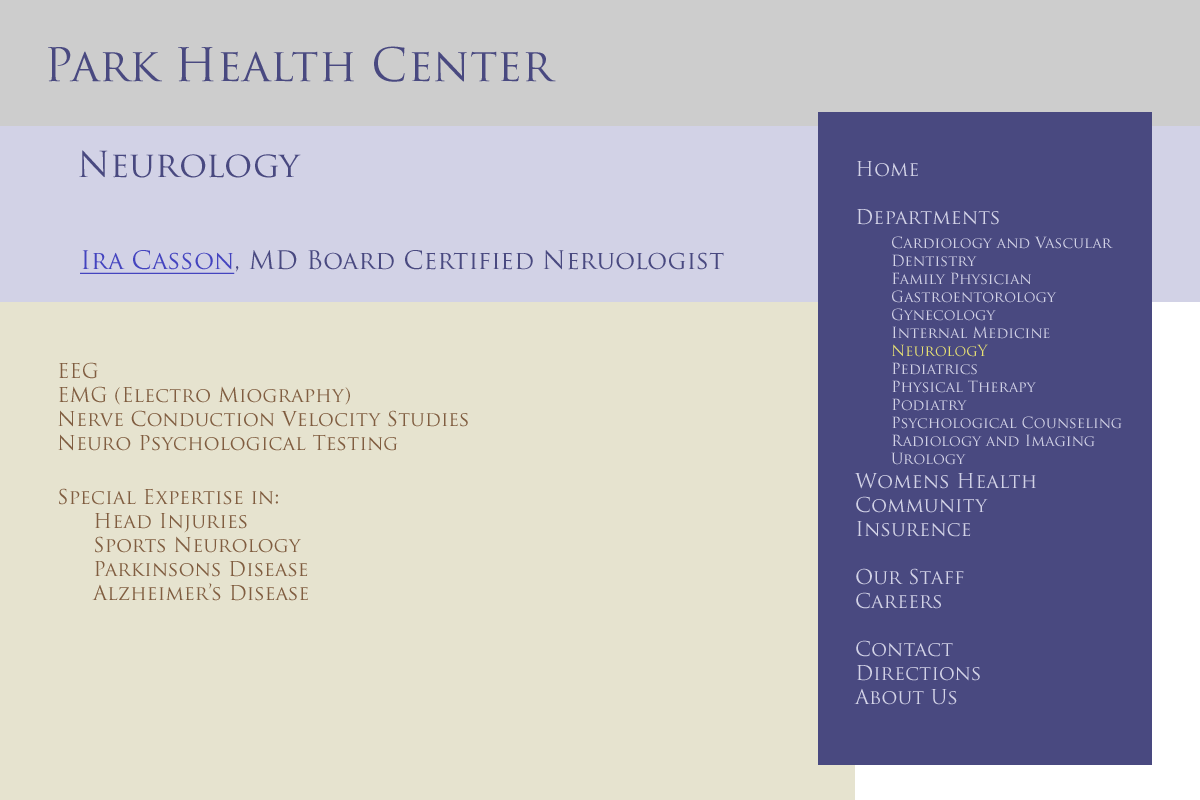
<style>
.page{position:relative;width:1200px;height:800px;background:#e6e3cf}
.page>*{position:absolute;margin:0}
.t1{font:45px "TrajanPro-Regular";color:#494980}
.t2{font:35px "TrajanPro-Regular";color:#494980}
.t3{font:15px "TrajanPro-Regular";color:#d2d2e6}
.t4{font:20px "TrajanPro-Regular";color:#d2d2e6}
.t5{font:15px "TrajanPro-Regular";color:#e6e073}
.t6{font:25px "TrajanPro-Regular";color:#494980}
.t7{font:25px "TrajanPro-Regular";color:#4444bf;text-decoration:underline}
.t8{font:20px "TrajanPro-Regular";color:#805d40}
</style>
<div class="page">
<p class="t1" style="left:48px;top:46px;width:508px;height:36px">Park Health Center</p>
<p class="t2" style="left:79px;top:150px;width:222px;height:28px">Neurology</p>
<p class="t3" style="left:854px;top:161px;width:268px;height:544px"><span class="t4">Home<br><br>Departments<br> </span>Cardiology and Vascular<br> Dentistry<br> Family Physician<br> Gastroentorology<br> Gynecology<br> Internal Medicine<br><span class="t5"> NeurologY<br> </span>Pediatrics<br> Physical Therapy<br> Podiatry<br> Psychological Counseling<br> Radiology and Imaging<br> Urology<br><span class="t4">Womens Health<br>Community<br>Insurence<br><br>Our Staff<br>Careers<br><br>Contact<br>Directions<br>About Us</span></p>
<p class="t6" style="left:80px;top:250px;width:644px;height:24px"><span class="t7">Ira Casson</span>, MD Board Certified Neruologist</p>
<p class="t8" style="left:58px;top:362px;width:410px;height:239px">EEG<br>EMG (Electro Miography)<br>Nerve Conduction Velocity Studies<br>Neuro Psychological Testing<br><br>Special Expertise in: <br> Head Injuries<br> Sports Neurology<br> Parkinsons Disease<br> Alzheimer’s Disease</p>
</div>
